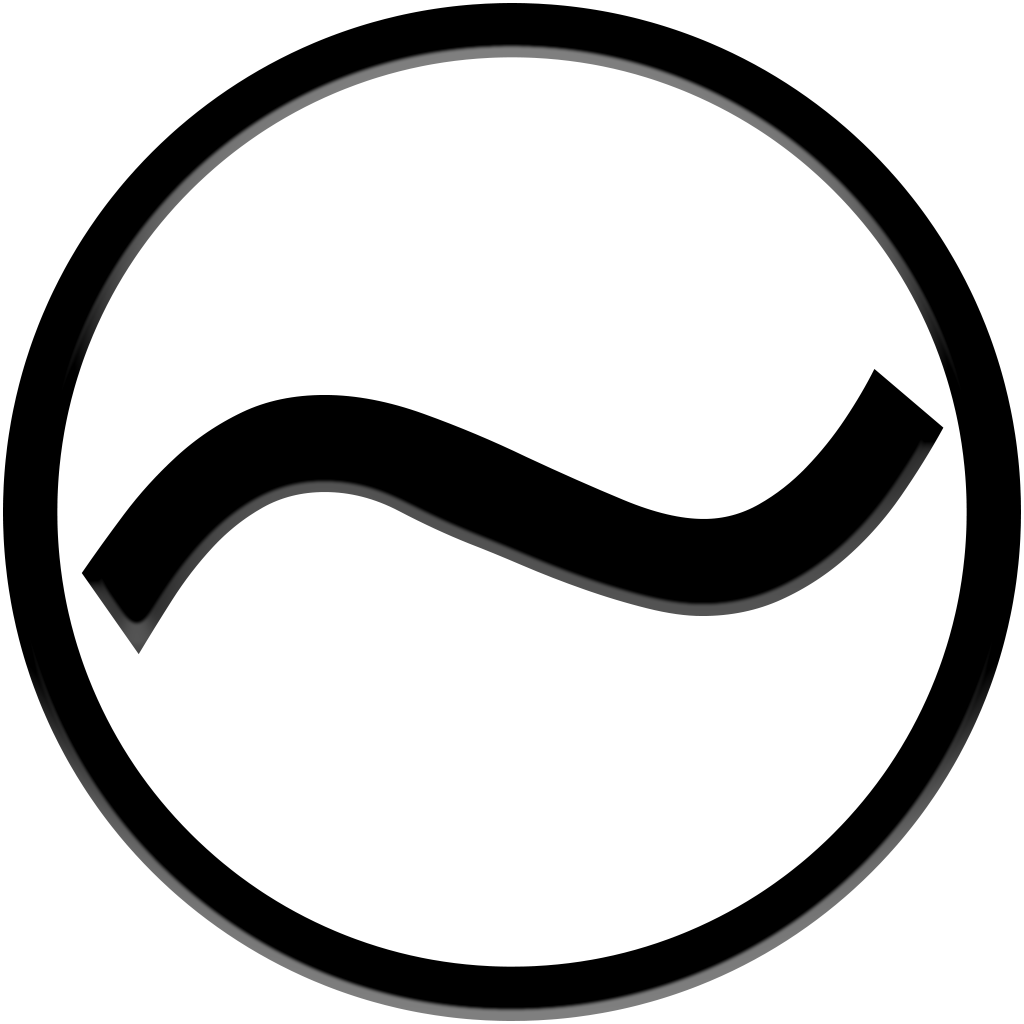
<style>
.page{position:relative;width:1024px;height:1024px;background:#ffffff}
.page>*{position:absolute;margin:0}
.t1{font:1724.4px "Helvetica-Light";color:#000000}
</style>
<div class="page">
<p class="t1" style="left:81px;top:369px;width:863px;height:286px">~</p>
</div>
